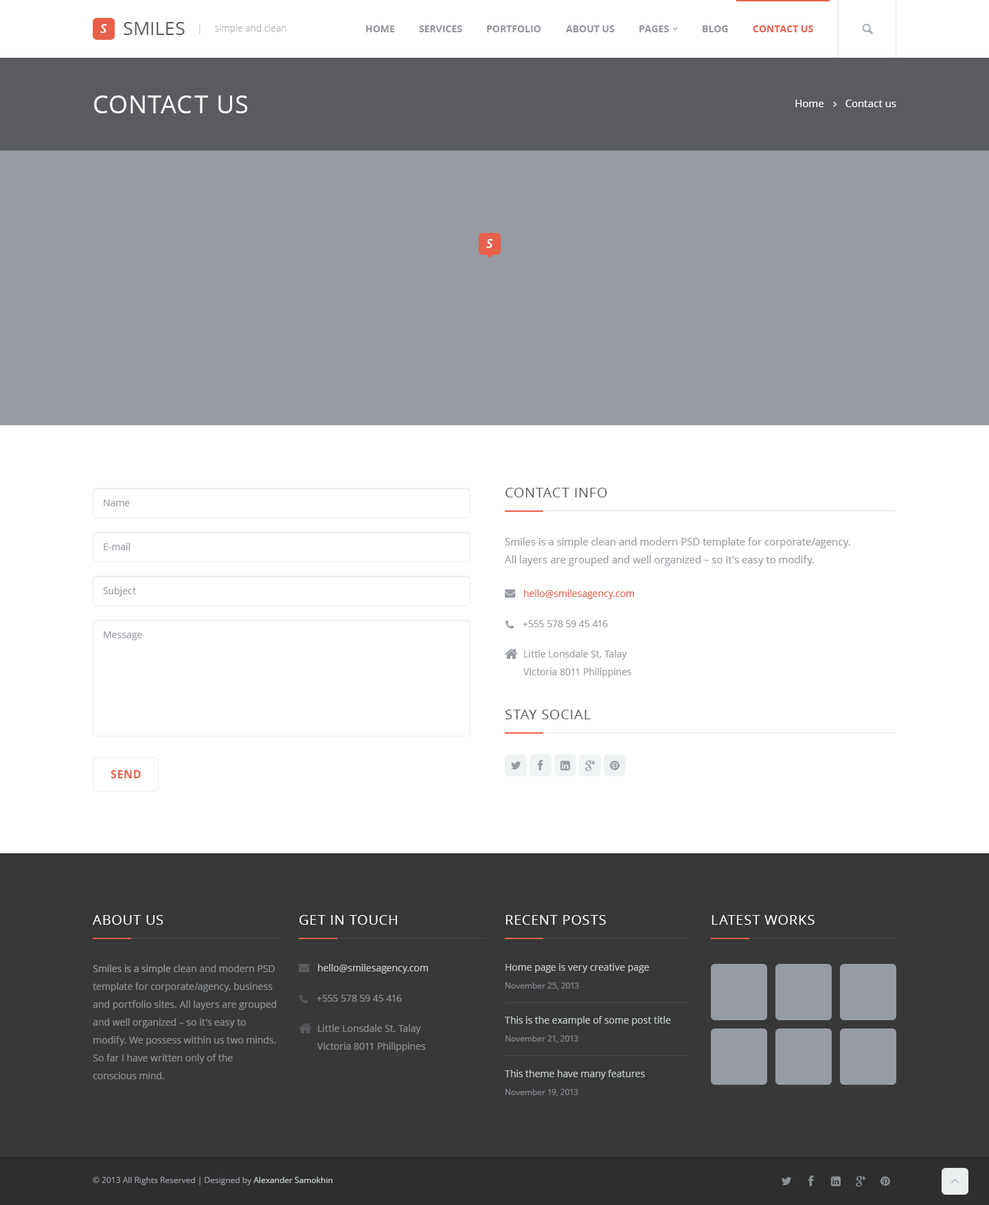
<style>
.page{position:relative;width:989px;height:1205px;background:#ffffff}
.page>*{position:absolute;margin:0}
.t1{font:12.4px "OpenSans-SemiboldItalic";color:#ffffff}
.t2{font:18.6px "OpenSans";color:#5a5b5f}
.t3{font:9.6px "OpenSans-Light";color:#abaeb5}
.t4{font:9.6px "OpenSans-Bold";color:#93969f}
.t5{font:9.6px "OpenSans-Bold";color:#e7604a}
.t6{font:24.7px "OpenSans";letter-spacing:0.04em;color:#ffffff}
.t7{font:10.3px "OpenSans";color:#ffffff}
.t8{font:13.7px "OpenSans";letter-spacing:0.04em;color:#5a5b5f}
.t9{font:9.6px "OpenSans";color:#979ba3}
.t10{font:10.3px/17.9px "OpenSans";color:#979ba3}
.t11{font:9.6px "OpenSans";color:#e7604a}
.t12{font:9.6px/17.9px "OpenSans";color:#979ba3}
.t13{font:11px "OpenSans-Bold";letter-spacing:0.04em;color:#e7604a}
.t14{font:13.7px "OpenSans";letter-spacing:0.04em;color:#fafcfc}
.t15{font:9.6px/17.9px "OpenSans";color:#8c9195}
.t16{font:9.6px "OpenSans";color:#c2c9cc}
.t17{font:9.6px/17.9px "OpenSans";color:#c2c9cc}
.t18{font:8.2px/17.9px "OpenSans";color:#848890}
.t19{font:9.6px "OpenSans";color:#8c9195}
.t20{font:8.2px "OpenSans";color:#979ba3}
.t21{font:8.2px "OpenSans";color:#c2c9cc}
</style>
<div class="page">
<p class="t1" style="left:100px;top:24px;width:7px;height:9px">S</p>
<p class="t2" style="left:124px;top:22px;width:61px;height:13px">SMILES</p>
<p class="t3" style="left:199px;top:24px;width:88px;height:10px">|     simple and clean</p>
<p class="t4" style="left:366px;top:25px;width:29px;height:7px">HOME</p>
<p class="t4" style="left:419px;top:25px;width:43px;height:7px">SERVICES</p>
<p class="t4" style="left:487px;top:25px;width:54px;height:7px">PORTFOLIO</p>
<p class="t4" style="left:566px;top:25px;width:49px;height:7px">ABOUT US</p>
<p class="t4" style="left:640px;top:25px;width:29px;height:7px">PAGES</p>
<p class="t4" style="left:703px;top:25px;width:25px;height:7px">BLOG</p>
<p class="t5" style="left:753px;top:25px;width:61px;height:7px">CONTACT US</p>
<p class="t6" style="left:94px;top:96px;width:153px;height:17px">CONTACT US</p>
<p class="t7" style="left:796px;top:100px;width:101px;height:7px">Home        Contact us</p>
<p class="t1" style="left:486px;top:239px;width:7px;height:9px">S</p>
<p class="t8" style="left:506px;top:488px;width:101px;height:9px">CONTACT INFO</p>
<p class="t9" style="left:104px;top:500px;width:26px;height:6px">Name</p>
<p class="t9" style="left:104px;top:543px;width:26px;height:7px">E-mail</p>
<p class="t10" style="left:505px;top:537px;width:346px;height:29px">Smiles is a simple clean and modern PSD template for corporate/agency. <br>All layers are grouped and well organized – so it’s easy to modify.</p>
<p class="t9" style="left:103px;top:587px;width:33px;height:9px">Subject</p>
<p class="t11" style="left:524px;top:590px;width:110px;height:9px">hello@smilesagency.com</p>
<p class="t9" style="left:523px;top:620px;width:85px;height:7px">+555 578 59 45 416</p>
<p class="t9" style="left:104px;top:631px;width:38px;height:9px">Message</p>
<p class="t12" style="left:524px;top:650px;width:108px;height:27px">Little Lonsdale St, Talay<br>Victoria 8011 Philippines</p>
<p class="t8" style="left:505px;top:710px;width:86px;height:9px">STAY SOCIAL</p>
<p class="t13" style="left:111px;top:770px;width:30px;height:8px">SEND</p>
<p class="t14" style="left:93px;top:915px;width:71px;height:10px">ABOUT US</p>
<p class="t14" style="left:300px;top:915px;width:97px;height:10px">GET IN TOUCH</p>
<p class="t14" style="left:506px;top:915px;width:100px;height:10px">RECENT POSTS</p>
<p class="t14" style="left:712px;top:915px;width:103px;height:10px">LATEST WORKS</p>
<p class="t15" style="left:93px;top:965px;width:183px;height:114px"><span class="t12">Smiles is a simple</span> clean and modern PSD template for corporate/agency, business and portfolio sites. All layers are grouped and well organized – so it’s easy to modify. We possess within us two minds. So far I have written only of the conscious mind.</p>
<p class="t16" style="left:318px;top:964px;width:110px;height:10px">hello@smilesagency.com</p>
<p class="t17" style="left:506px;top:963px;width:143px;height:27px">Home page is very creative page<br><span class="t18">November 25, 2013</span></p>
<p class="t19" style="left:317px;top:995px;width:85px;height:7px">+555 578 59 45 416</p>
<p class="t15" style="left:317px;top:1024px;width:109px;height:28px">Little Lonsdale St, Talay<br>Victoria 8011 Philippines</p>
<p class="t17" style="left:505px;top:1016px;width:166px;height:27px">This is the example of some post title<br><span class="t18">November 21, 2013</span></p>
<p class="t17" style="left:505px;top:1070px;width:140px;height:27px">This theme have many features<br><span class="t18">November 19, 2013</span></p>
<p class="t20" style="left:93px;top:1177px;width:240px;height:8px">© 2013 All Rights Reserved | Designed by <span class="t21">Alexander Samokhin</span></p>
</div>
